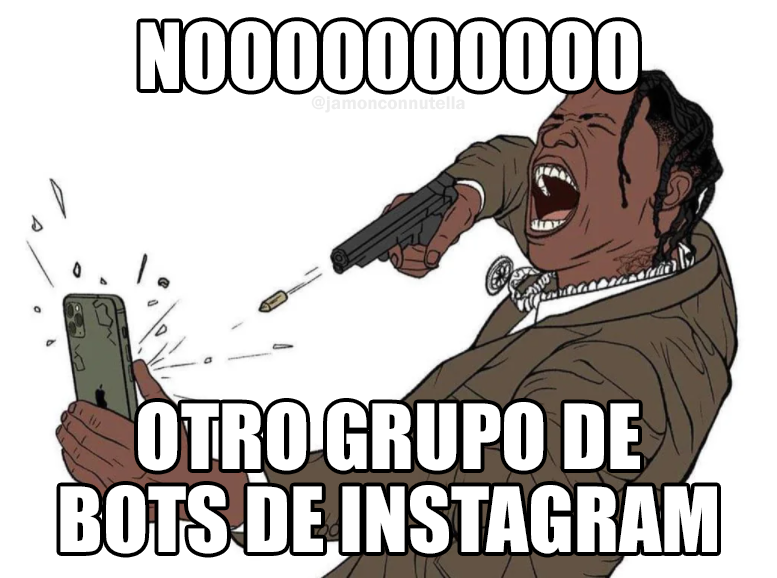
<style>
.page{position:relative;width:777px;height:578px;background:#ffffff}
.page>*{position:absolute;margin:0}
.t1{font:83.9px "Impact";color:#ffffff}
.t2{font:19px "FranklinGothic-Demi";color:#ececec}
.t3{font:83.1px "Impact";color:#ffffff}
</style>
<div class="page">
<p class="t1" style="left:140px;top:21px;width:498px;height:70px">NOOOOOOOOOO</p>
<p class="t2" style="left:311px;top:95px;width:154px;height:18px">@jamonconnutella</p>
<p class="t3" style="left:60px;top:402px;width:657px;height:152px;text-align:center">OTRO GRUPO DE<br>BOTS DE INSTAGRAM</p>
</div>
